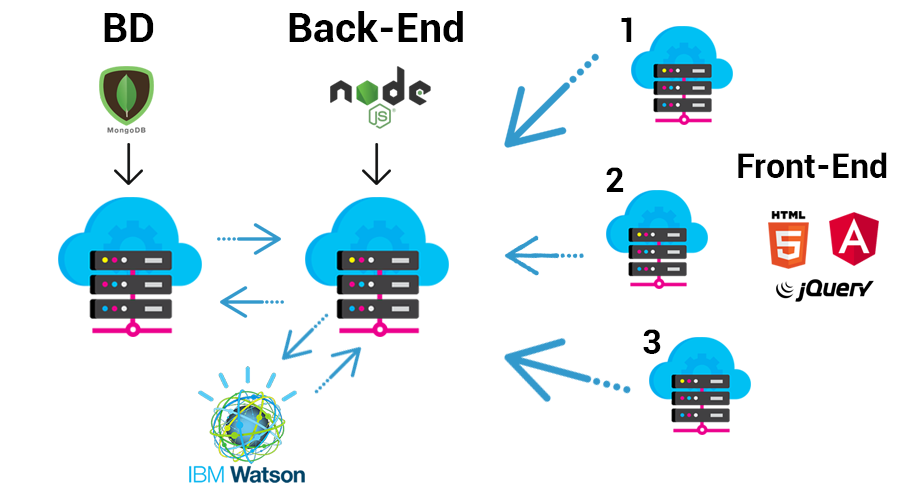
<style>
.page{position:relative;width:900px;height:500px;background:#ffffff}
.page>*{position:absolute;margin:0}
.t1{font:40.8px "Roboto-Bold";color:#000000}
.t2{font:34.6px "Roboto-Bold";color:#000000}
</style>
<div class="page">
<p class="t1" style="left:104px;top:13px;width:50px;height:29px">BD</p>
<p class="t1" style="left:289px;top:11px;width:174px;height:31px">Back-End</p>
<p class="t2" style="left:621px;top:17px;width:11px;height:25px">1</p>
<p class="t2" style="left:738px;top:152px;width:149px;height:26px">Front-End</p>
<p class="t2" style="left:606px;top:167px;width:18px;height:25px">2</p>
<p class="t2" style="left:643px;top:329px;width:18px;height:25px">3</p>
</div>
